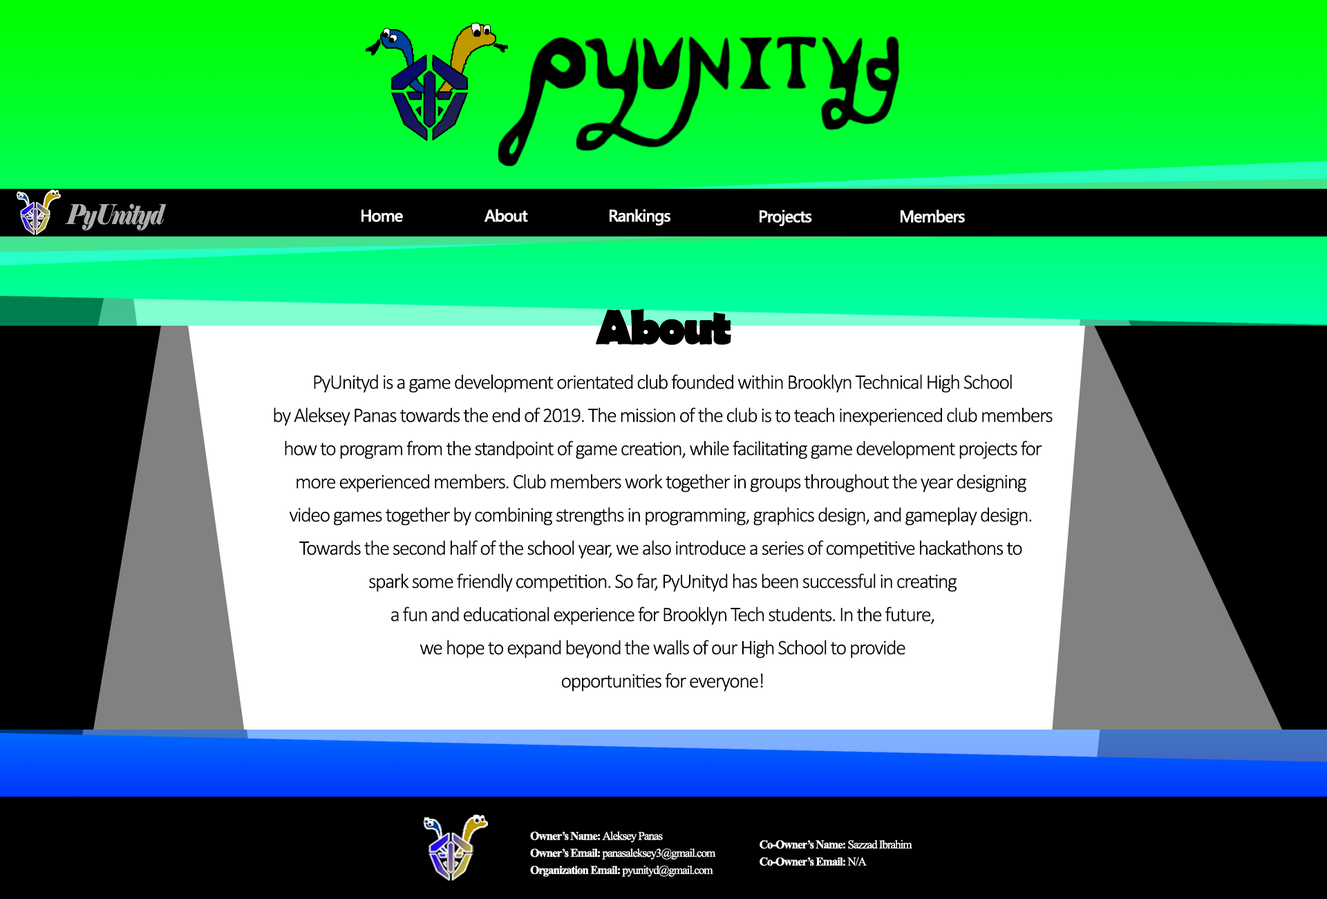
<style>
.page{position:relative;width:1327px;height:899px;background:#000000}
.page>*{position:absolute;margin:0}
.t1{font:27.1px "Elephant-Italic";letter-spacing:-0.05em;color:#adadad;scale:0.77 1}
.t2{font:16.6px "SegoeUI-SemiBold";letter-spacing:-0.05em;color:#ffffff}
.t3{font:49.8px "BerlinSansFB-Bold";letter-spacing:-0.05em;color:#000000}
.t4{font:20.7px/33.2px "Calibri-Light";letter-spacing:-0.05em;color:#000000}
.t5{font:14.2px "ShonarBangla";letter-spacing:-0.05em;color:#ffffff}
.t6{font:14.2px "ShonarBangla-Bold";letter-spacing:-0.05em;color:#ffffff}
</style>
<div class="page">
<p class="t1" style="left:65px;top:203px;width:102px;height:28px">PyUnityd</p>
<p class="t2" style="left:361px;top:209px;width:42px;height:13px">Home</p>
<p class="t2" style="left:485px;top:209px;width:43px;height:13px">About</p>
<p class="t2" style="left:610px;top:209px;width:60px;height:16px">Rankings</p>
<p class="t2" style="left:760px;top:209px;width:52px;height:17px">Projects</p>
<p class="t2" style="left:901px;top:209px;width:64px;height:14px">Members</p>
<p class="t3" style="left:596px;top:309px;width:135px;height:36px">About</p>
<p class="t4" style="left:274px;top:374px;width:779px;height:317px;text-align:center">PyUnityd is a game development orientated club founded within Brooklyn Technical High School<br>by Aleksey Panas towards the end of 2019. The mission of the club is to teach inexperienced club members<br>how to program from the standpoint of game creation, while facilitating game development projects for<br>more experienced members. Club members work together in groups throughout the year designing <br>video games together by combining strengths in programming, graphics design, and gameplay design. <br>Towards the second half of the school year, we also introduce a series of competitive hackathons to <br>spark some friendly competition. So far, PyUnityd has been successful in creating<br>a fun and educational experience for Brooklyn Tech students. In the future,<br>we hope to expand beyond the walls of our High School to provide<br>opportunities for everyone!</p>
<p class="t5" style="left:530px;top:831px;width:186px;height:45px"><span class="t6">Owner’s Name: </span>Aleksey Panas<br><span class="t6">Owner’s Email: </span>panasaleksey3@gmail.com<br><span class="t6">Organization Email: </span>pyunityd@gmail.com</p>
<p class="t6" style="left:760px;top:839px;width:152px;height:26px">Co-Owner’s Name:<span class="t5"> Sazzad Ibrahim<br></span>Co-Owner’s Email:<span class="t5"> N/A</span></p>
</div>
